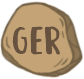
<style>
.page{position:relative;width:84px;height:79px;background:#c4a476}
.page>*{position:absolute;margin:0}
.t1{font:38px "LeiraLite";letter-spacing:0.025em;color:#67513f}
</style>
<div class="page">
<p class="t1" style="left:12px;top:26px;width:48px;height:29px">GER</p>
</div>
